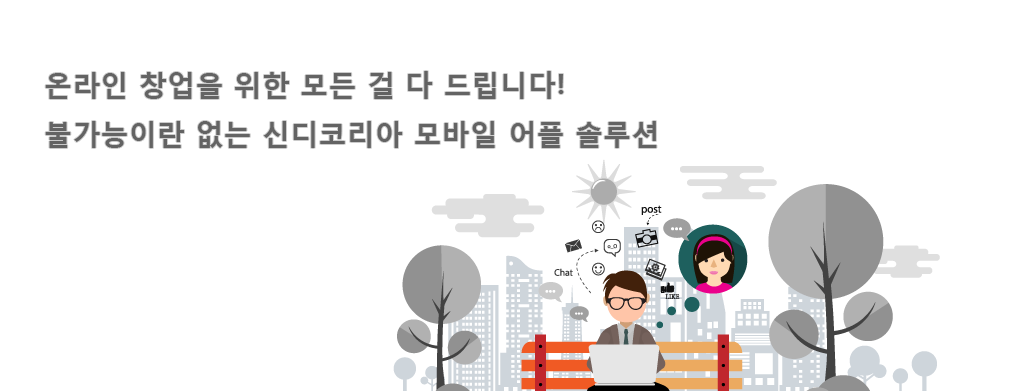
<style>
.page{position:relative;width:1030px;height:391px;background:#ffffff}
.page>*{position:absolute;margin:0}
.t1{font:28.3px/49px "MalgunGothicBold";color:#636363}
</style>
<div class="page">
<p class="t1" style="left:45px;top:71px;width:612px;height:77px">온라인 창업을 위한 모든 걸 다 드립니다!<br>불가능이란 없는 신디코리아 모바일 어플 솔루션</p>
</div>
